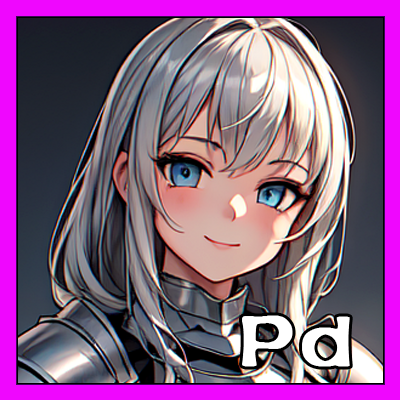
<style>
.page{position:relative;width:400px;height:400px}
.page>*{position:absolute;margin:0}
.t1{font:74.2px "YetR-HM";color:#ffffff;font-weight:bold;scale:1.33 1}
</style>
<div class="page">
<p class="t1" style="left:240px;top:314px;width:112px;height:54px">Pd</p>
</div>
